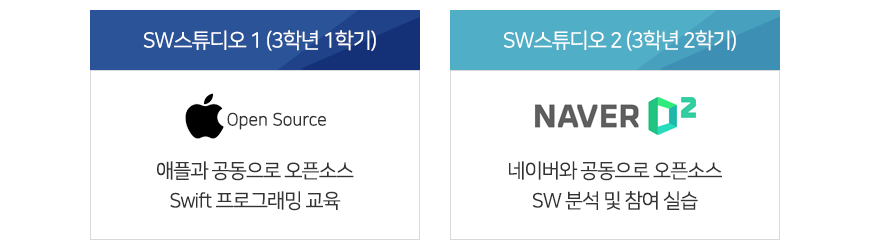
<style>
.page{position:relative;width:870px;height:250px;background:#ffffff}
.page>*{position:absolute;margin:0}
.t1{font:21px "NanumSquareR";letter-spacing:-0.05em;color:#ffffff}
.t2{font:17px "NanumSquareL";letter-spacing:-0.01em;color:#333333;font-weight:bold}
.t3{font:20px/30px "NanumSquareR";letter-spacing:-0.05em;color:#333333}
</style>
<div class="page">
<p class="t1" style="left:143px;top:30px;width:233px;height:21px">SW스튜디오 1 (3학년 1학기)</p>
<p class="t1" style="left:503px;top:30px;width:233px;height:21px">SW스튜디오 2 (3학년 2학기)</p>
<p class="t2" style="left:227px;top:112px;width:99px;height:18px">Open Source</p>
<p class="t3" style="left:157px;top:161px;width:197px;height:50px;text-align:center">애플과 공동으로 오픈소스<br>Swift 프로그래밍 교육</p>
<p class="t3" style="left:509px;top:161px;width:213px;height:49px;text-align:center">네이버와 공동으로 오픈소스<br>SW 분석 및 참여 실습</p>
</div>
